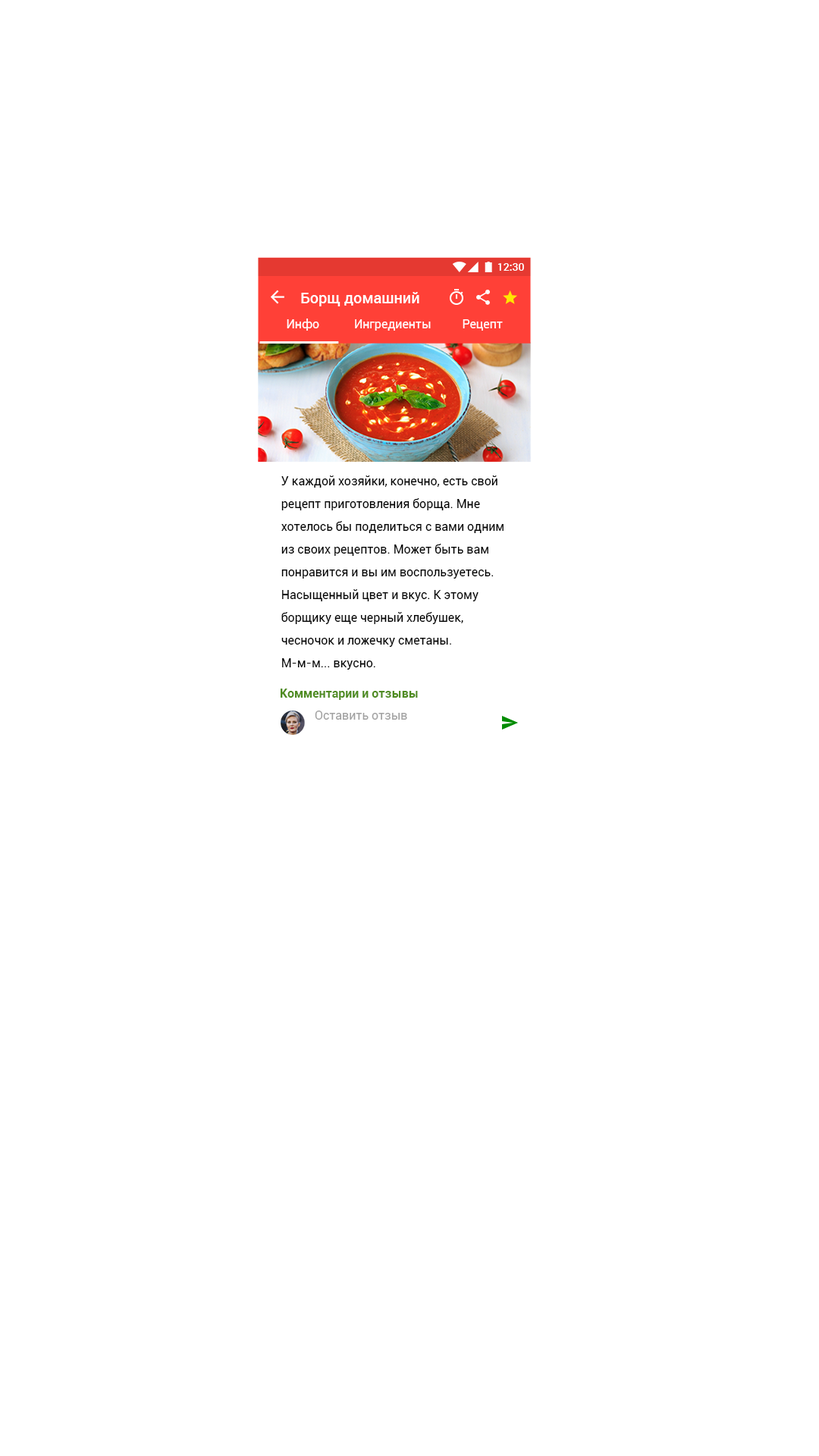
<style>
.page{position:relative;width:819px;height:1456px;background:#ffffff}
.page>*{position:absolute;margin:0}
.t1{font:10.6px "Roboto-Medium";color:#ffffff}
.t2{font:15.1px "Roboto-Medium";color:#ffffff}
.t3{font:12.1px "Roboto-Regular";color:#ffffff}
.t4{font:12.1px/22.7px "Roboto-Regular";color:#000000}
.t5{font:12.1px "Roboto-Bold";color:#4f8c21}
.t6{font:12.1px "Roboto-Regular";color:#a1a1a1}
</style>
<div class="page">
<p class="t1" style="left:497px;top:263px;width:27px;height:8px">12:30</p>
<p class="t2" style="left:301px;top:292px;width:118px;height:14px">Борщ домашний</p>
<p class="t3" style="left:287px;top:318px;width:32px;height:13px">Инфо</p>
<p class="t3" style="left:355px;top:319px;width:76px;height:12px">Ингредиенты</p>
<p class="t3" style="left:463px;top:319px;width:40px;height:12px">Рецепт</p>
<p class="t4" style="left:281px;top:475px;width:223px;height:195px">У каждой хозяйки, конечно, есть свой <br>рецепт приготовления борща. Мне <br>хотелось бы поделиться с вами одним <br>из своих рецептов. Может быть вам <br>понравится и вы им воспользуетесь. <br>Насыщенный цвет и вкус. К этому <br>борщику ещe чeрный хлебушек, <br>чесночок и ложечку сметаны. <br>М-м-м... вкусно.</p>
<p class="t5" style="left:281px;top:689px;width:137px;height:11px">Комментарии и отзывы</p>
<p class="t6" style="left:315px;top:711px;width:92px;height:9px">Оставить отзыв</p>
</div>
